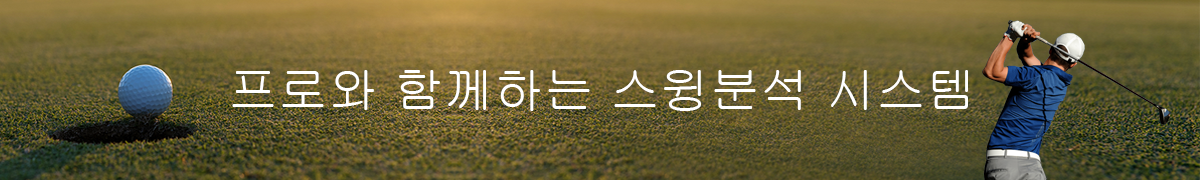
<style>
.page{position:relative;width:1200px;height:180px}
.page>*{position:absolute;margin:0}
.t1{font:50px "Gulim";color:#ffffff}
</style>
<div class="page">
<p class="t1" style="left:232px;top:70px;width:736px;height:41px">프로와 함께하는 스윙분석 시스템</p>
</div>
